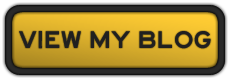
<style>
.page{position:relative;width:230px;height:80px}
.page>*{position:absolute;margin:0}
.t1{font:25px "Highway-Gothic-Expanded";letter-spacing:-0.025em;color:#202020;text-transform:uppercase}
</style>
<div class="page">
<p class="t1" style="left:19px;top:31px;width:192px;height:18px">view my blog</p>
</div>
